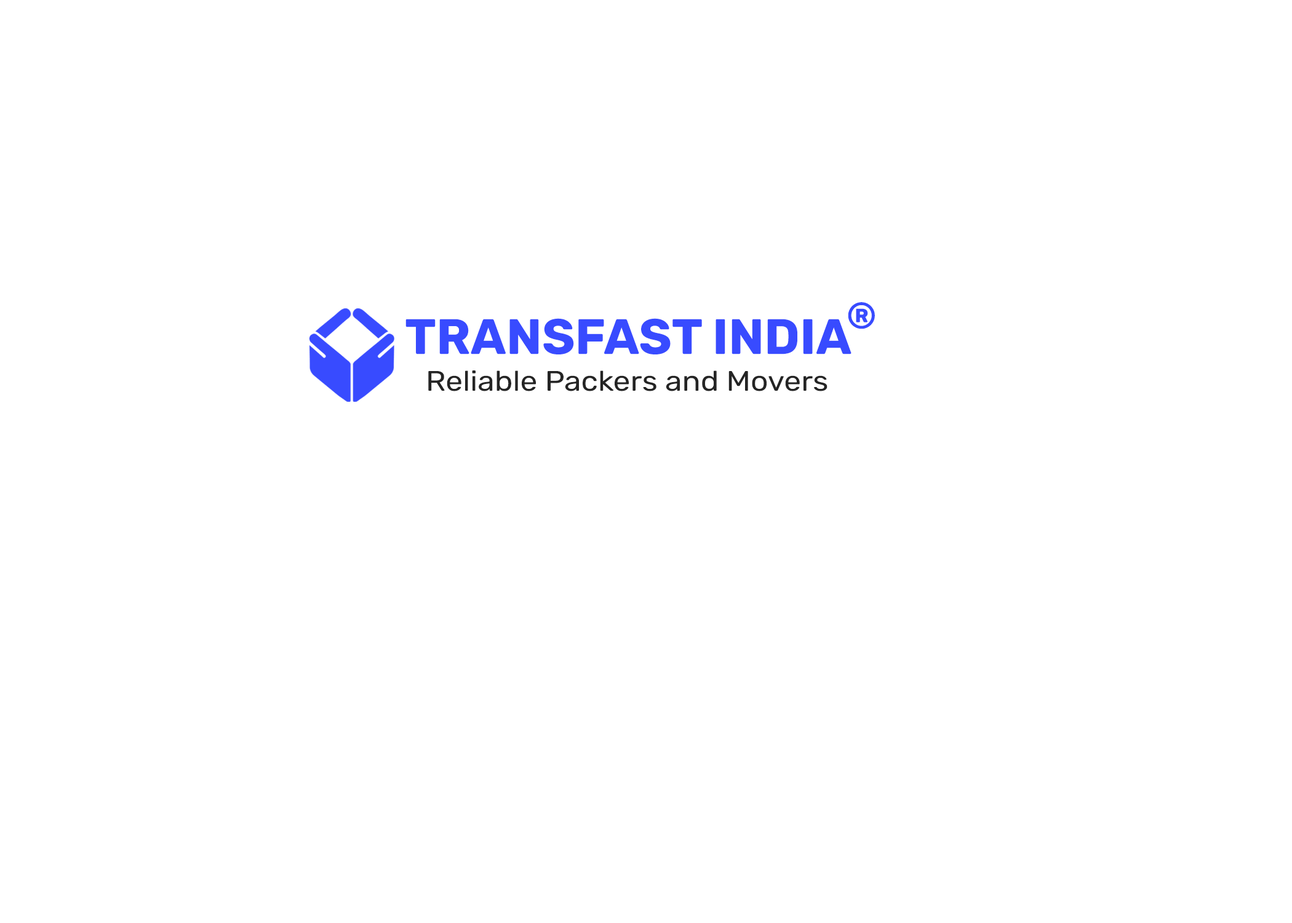
<style>
.page{position:relative;width:1292px;height:923px;background:#ffffff}
.page>*{position:absolute;margin:0}
.t1{font:37px "Rubik-Bold";color:#384bff}
.t2{font:49.8px "Rubik-Bold";color:#384bff}
.t3{font:28.2px "Rubik-Regular";color:#242424;scale:1.09 1}
</style>
<div class="page">
<p class="t1" style="left:848px;top:302px;width:27px;height:27px">®</p>
<p class="t2" style="left:405px;top:318px;width:447px;height:36px">TRANSFAST INDIA</p>
<p class="t3" style="left:428px;top:370px;width:400px;height:21px">Reliable Packers and Movers</p>
</div>
